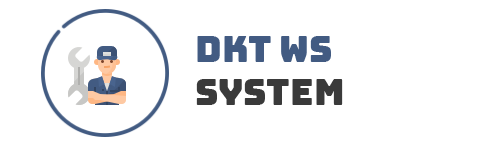
<style>
.page{position:relative;width:500px;height:150px;background:#ffffff}
.page>*{position:absolute;margin:0}
.t1{font:36px "Bungee-Regular";color:#425b82}
.t2{font:36px "Bungee-Regular";color:#3a3a3a}
</style>
<div class="page">
<p class="t1" style="left:196px;top:36px;width:147px;height:69px">DKT WS <br><span class="t2">System</span></p>
</div>
